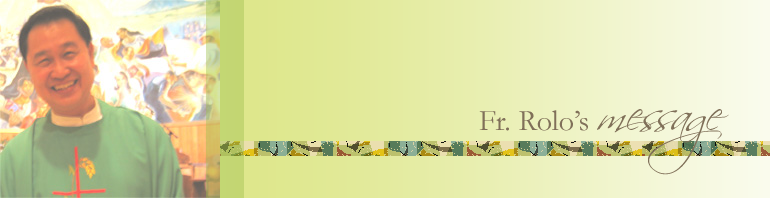
<style>
.page{position:relative;width:770px;height:198px}
.page>*{position:absolute;margin:0}
.t1{font:30px "Garamond";color:#807059}
.t2{font:48px "Scriptina";color:#807059}
</style>
<div class="page">
<p class="t1" style="left:479px;top:109px;width:250px;height:66px">Fr. Rolo’s <span class="t2">message</span></p>
</div>
